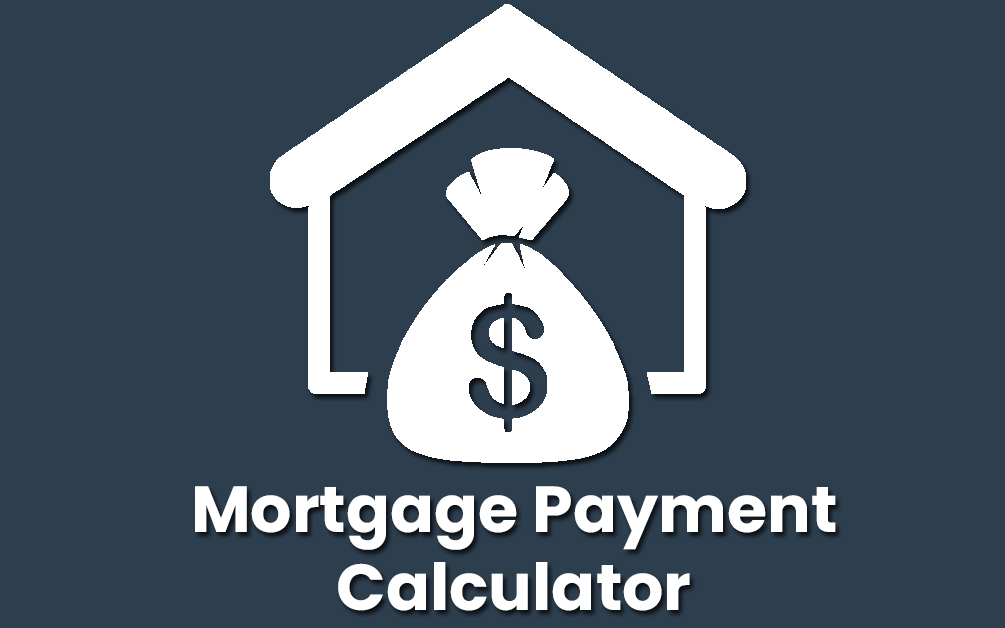
<style>
.page{position:relative;width:1005px;height:628px;background:#2d3e4e}
.page>*{position:absolute;margin:0}
.t1{font:65px "Poppins-Bold";color:#ffffff}
</style>
<div class="page">
<p class="t1" style="left:195px;top:486px;width:641px;height:125px;text-align:center">Mortgage Payment Calculator</p>
</div>
